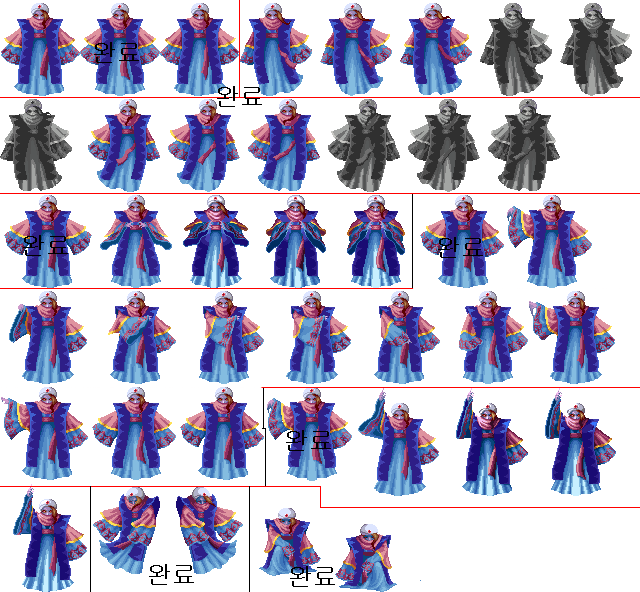
<style>
.page{position:relative;width:640px;height:592px;background:#ffffff}
.page>*{position:absolute;margin:0}
.t1{font:24px "Gulim";color:#000000}
</style>
<div class="page">
<p class="t1" style="left:94px;top:42px;width:45px;height:21px">완료</p>
<p class="t1" style="left:217px;top:86px;width:45px;height:21px">완료</p>
<p class="t1" style="left:23px;top:235px;width:45px;height:21px">완료</p>
<p class="t1" style="left:438px;top:237px;width:45px;height:21px">완료</p>
<p class="t1" style="left:286px;top:430px;width:45px;height:21px">완료</p>
<p class="t1" style="left:149px;top:564px;width:45px;height:21px">완료</p>
<p class="t1" style="left:290px;top:566px;width:45px;height:21px">완료</p>
</div>
